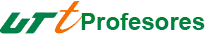
<style>
.page{position:relative;width:205px;height:34px;background:#ffffff}
.page>*{position:absolute;margin:0}
.t1{font:24px "Arial-BoldMT";color:#01823c}
</style>
<div class="page">
<p class="t1" style="left:81px;top:13px;width:124px;height:17px">Profesores</p>
</div>
